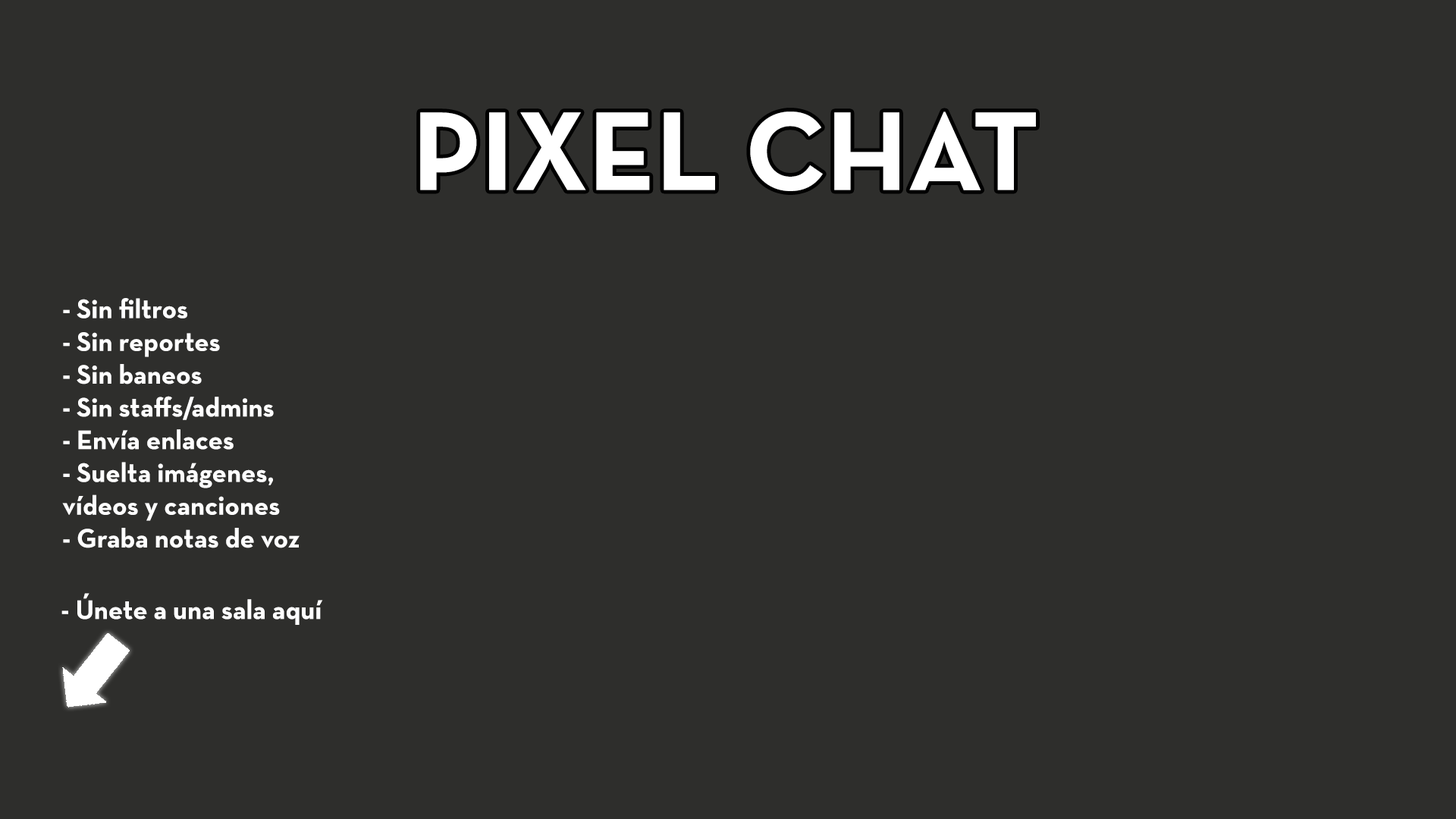
<style>
.page{position:relative;width:1456px;height:819px;background:#2e2e2c}
.page>*{position:absolute;margin:0}
.t1{font:113.7px "NeutrafaceText-Bold";color:#ffffff}
.t2{font:27.3px "NeutrafaceText-Bold";color:#ffffff}
</style>
<div class="page">
<p class="t1" style="left:420px;top:111px;width:616px;height:80px">PIXEL CHAT</p>
<p class="t2" style="left:62px;top:298px;width:238px;height:250px">- Sin filtros<br>- Sin reportes<br>- Sin baneos<br>- Sin staffs/admins<br>- Envía enlaces<br>- Suelta imágenes, <br>vídeos y canciones<br>- Graba notas de voz</p>
<p class="t2" style="left:61px;top:593px;width:262px;height:32px">- Únete a una sala aquí</p>
</div>
